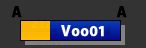
<style>
.page{position:relative;width:146px;height:48px;background:#333333}
.page>*{position:absolute;margin:0}
.t1{font:15px "MyriadPro-Bold";color:#000000;font-weight:bold}
.t2{font:15px "MyriadPro-Bold";color:#ffffff;font-weight:bold}
</style>
<div class="page">
<p class="t1" style="left:11px;top:6px;width:11px;height:12px">A</p>
<p class="t1" style="left:116px;top:6px;width:11px;height:12px">A</p>
<p class="t2" style="left:61px;top:25px;width:43px;height:12px">Voo01</p>
</div>
